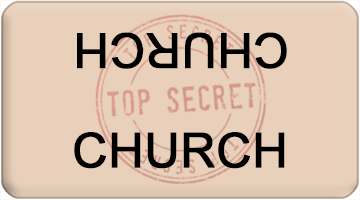
<style>
.page{position:relative;width:360px;height:200px;background:#e8d0bb}
.page>*{position:absolute;margin:0}
.t1{font:48px "ArialMT";color:#000000;font-weight:bold}
</style>
<div class="page">
<p class="t1" style="left:77px;top:32px;width:210px;height:37px;rotate:180deg">CHURCH</p>
<p class="t1" style="left:74px;top:132px;width:211px;height:37px">CHURCH</p>
</div>
